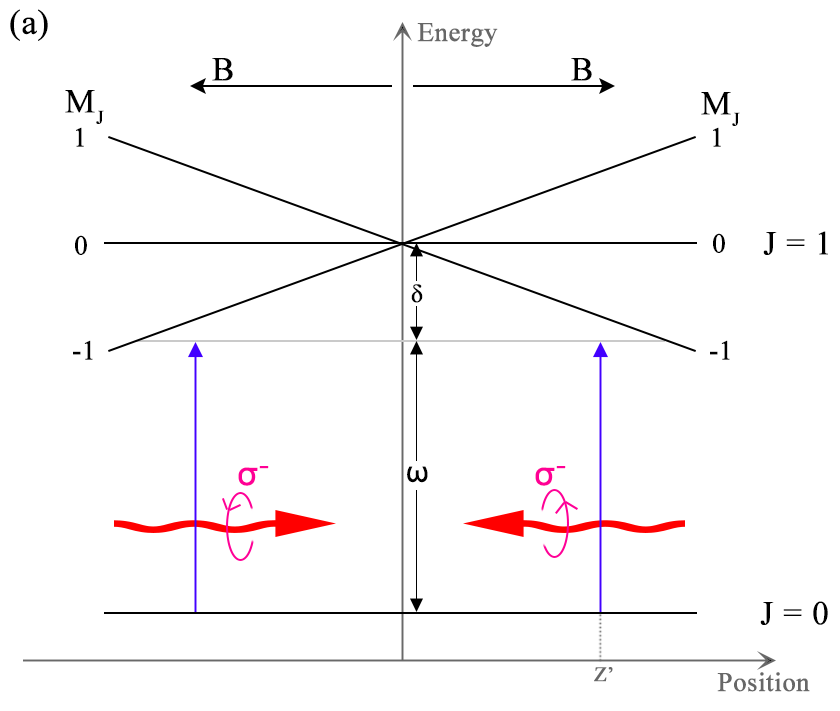
<style>
.page{position:relative;width:840px;height:711px;background:#ffffff}
.page>*{position:absolute;margin:0}
.t1{font:58.3px "TimesNewRomanPSMT";color:#000000;font-weight:bold}
.t2{font:26.5px "TimesNewRomanPSMT";color:#676767;font-weight:bold}
.t3{font:33.3px "TimesNewRomanPSMT";color:#000000;font-weight:bold}
.t4{font:27.5px "TimesNewRomanPSMT";color:#000000;font-weight:bold}
.t5{font:43.8px "TimesNewRomanPSMT";color:#000000;font-weight:bold}
.t6{font:33.3px "ArialMT";color:#ff0096;font-weight:bold}
.t7{font:37.5px "ArialMT";color:#ff0096;font-weight:bold;scale:1.33 1}
.t8{font:28.7px "ArialMT";color:#000000;font-weight:bold}
.t9{font:20.8px "TimesNewRomanPSMT";color:#676767;font-weight:bold}
</style>
<div class="page">
<p class="t1" style="left:10px;top:9px;width:38px;height:32px">(a)</p>
<p class="t2" style="left:417px;top:23px;width:81px;height:24px">Energy</p>
<p class="t3" style="left:212px;top:58px;width:21px;height:23px">B</p>
<p class="t3" style="left:571px;top:58px;width:21px;height:23px">B</p>
<p class="t3" style="left:65px;top:90px;width:39px;height:34px">MJ</p>
<p class="t3" style="left:701px;top:92px;width:39px;height:34px">MJ</p>
<p class="t4" style="left:76px;top:127px;width:8px;height:20px">1</p>
<p class="t4" style="left:713px;top:127px;width:8px;height:20px">1</p>
<p class="t4" style="left:713px;top:233px;width:12px;height:20px">0</p>
<p class="t3" style="left:763px;top:231px;width:65px;height:24px">J = 1</p>
<p class="t4" style="left:75px;top:235px;width:12px;height:20px">0</p>
<p class="t5" style="left:411px;top:284px;width:12px;height:19px">δ</p>
<p class="t4" style="left:73px;top:340px;width:20px;height:20px">-1</p>
<p class="t4" style="left:710px;top:340px;width:20px;height:20px">-1</p>
<p class="t6" style="left:238px;top:466px;width:31px;height:20px">σ<span class="t7">-</span></p>
<p class="t8" style="left:407px;top:466px;width:21px;height:17px">ω</p>
<p class="t6" style="left:535px;top:466px;width:31px;height:20px">σ<span class="t7">-</span></p>
<p class="t3" style="left:760px;top:601px;width:68px;height:24px">J = 0</p>
<p class="t9" style="left:594px;top:667px;width:19px;height:15px">Z’</p>
<p class="t2" style="left:717px;top:672px;width:93px;height:20px">Position</p>
</div>
